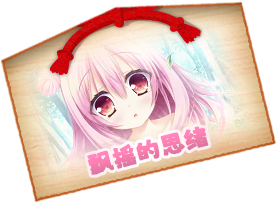
<style>
.page{position:relative;width:277px;height:203px;background:#ffffff}
.page>*{position:absolute;margin:0}
.t1{font:24px "MaokenAssortedSans";color:#f77eaf;font-weight:bold}
</style>
<div class="page">
<p class="t1" style="left:87px;top:126px;width:122px;height:49px;rotate:-15deg">飘摇的思绪</p>
</div>
